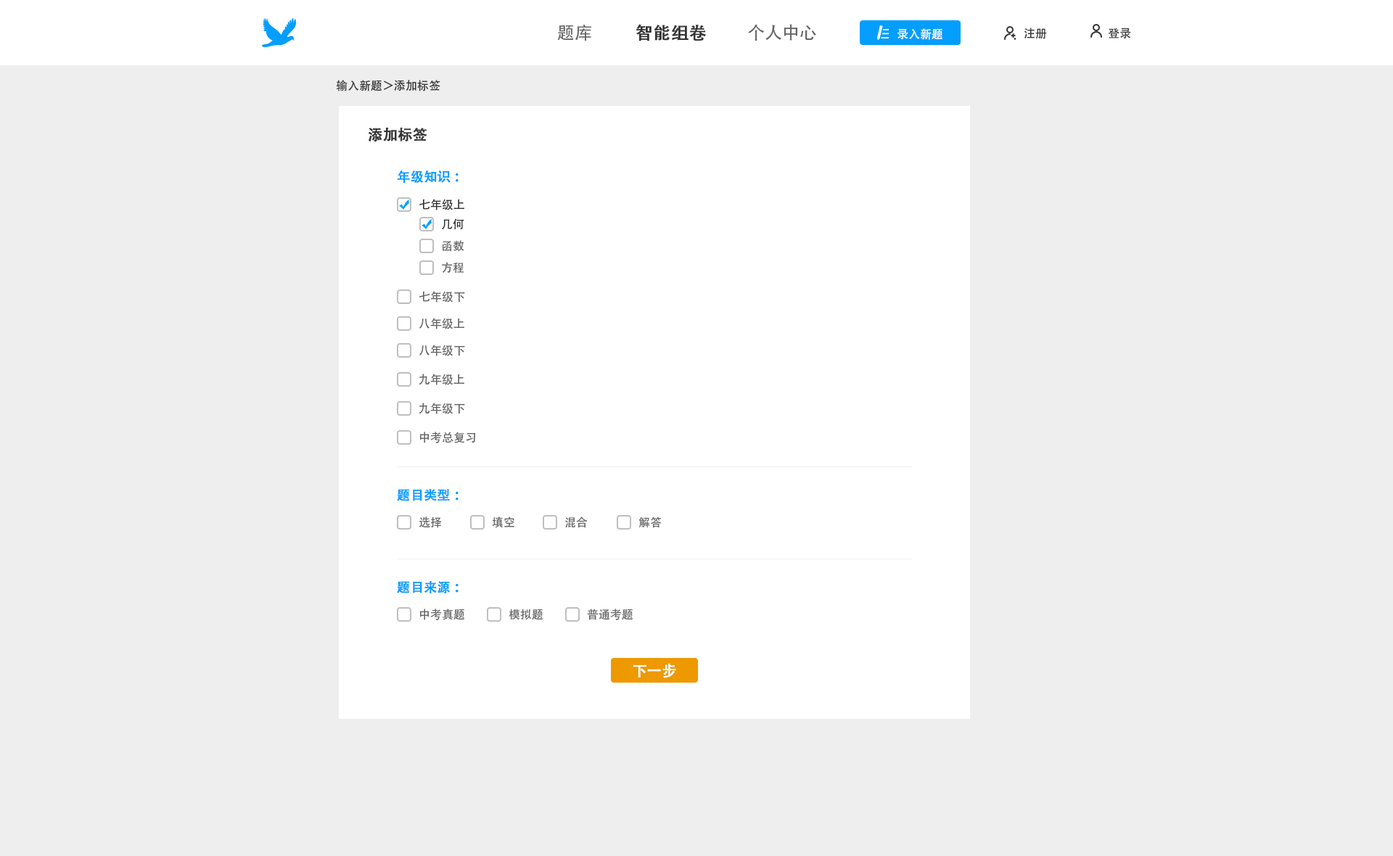
<style>
.page{position:relative;width:1393px;height:856px;background:#eeeeee}
.page>*{position:absolute;margin:0}
.t1{font:17.4px "AdobeHeitiStd-Regular";color:#666666}
.t2{font:17.4px "AdobeHeitiStd-Regular";color:#333333;font-weight:bold}
.t3{font:11.6px "AdobeHeitiStd-Regular";color:#ffffff}
.t4{font:11.6px "AdobeHeitiStd-Regular";color:#333333}
.t5{font:14.5px "AdobeHeitiStd-Regular";color:#333333;font-weight:bold}
.t6{font:13.1px "AdobeHeitiStd-Regular";color:#049eff;font-weight:bold}
.t7{font:11.6px "AdobeHeitiStd-Regular";color:#666666}
.t8{font:14.5px "AdobeHeitiStd-Regular";color:#ffffff;font-weight:bold}
</style>
<div class="page">
<p class="t1" style="left:557px;top:25px;width:34px;height:16px">题库</p>
<p class="t2" style="left:636px;top:24px;width:70px;height:17px">智能组卷</p>
<p class="t1" style="left:748px;top:24px;width:68px;height:17px">个人中心</p>
<p class="t3" style="left:897px;top:28px;width:45px;height:12px">录入新题</p>
<p class="t4" style="left:1024px;top:28px;width:23px;height:11px">注册</p>
<p class="t4" style="left:1108px;top:28px;width:23px;height:11px">登录</p>
<p class="t4" style="left:336px;top:80px;width:104px;height:11px">输入新题＞添加标签</p>
<p class="t5" style="left:368px;top:127px;width:59px;height:15px">添加标签</p>
<p class="t6" style="left:397px;top:170px;width:62px;height:14px">年级知识：</p>
<p class="t4" style="left:419px;top:199px;width:45px;height:11px">七年级上</p>
<p class="t4" style="left:441px;top:218px;width:23px;height:12px">几何</p>
<p class="t7" style="left:442px;top:240px;width:22px;height:12px">函数</p>
<p class="t7" style="left:442px;top:262px;width:22px;height:12px">方程</p>
<p class="t7" style="left:419px;top:291px;width:46px;height:12px">七年级下</p>
<p class="t7" style="left:419px;top:318px;width:45px;height:11px">八年级上</p>
<p class="t7" style="left:419px;top:345px;width:46px;height:11px">八年级下</p>
<p class="t7" style="left:419px;top:374px;width:45px;height:11px">九年级上</p>
<p class="t7" style="left:419px;top:403px;width:46px;height:11px">九年级下</p>
<p class="t7" style="left:419px;top:432px;width:57px;height:11px">中考总复习</p>
<p class="t6" style="left:397px;top:489px;width:62px;height:12px">题目类型：</p>
<p class="t7" style="left:419px;top:517px;width:23px;height:11px">选择</p>
<p class="t7" style="left:492px;top:517px;width:22px;height:11px">填空</p>
<p class="t7" style="left:565px;top:517px;width:23px;height:11px">混合</p>
<p class="t7" style="left:638px;top:517px;width:24px;height:11px">解答</p>
<p class="t6" style="left:397px;top:580px;width:62px;height:13px">题目来源：</p>
<p class="t7" style="left:419px;top:609px;width:45px;height:11px">中考真题</p>
<p class="t7" style="left:509px;top:609px;width:34px;height:11px">模拟题</p>
<p class="t7" style="left:587px;top:609px;width:46px;height:11px">普通考题</p>
<p class="t8" style="left:633px;top:663px;width:43px;height:15px">下一步</p>
</div>
